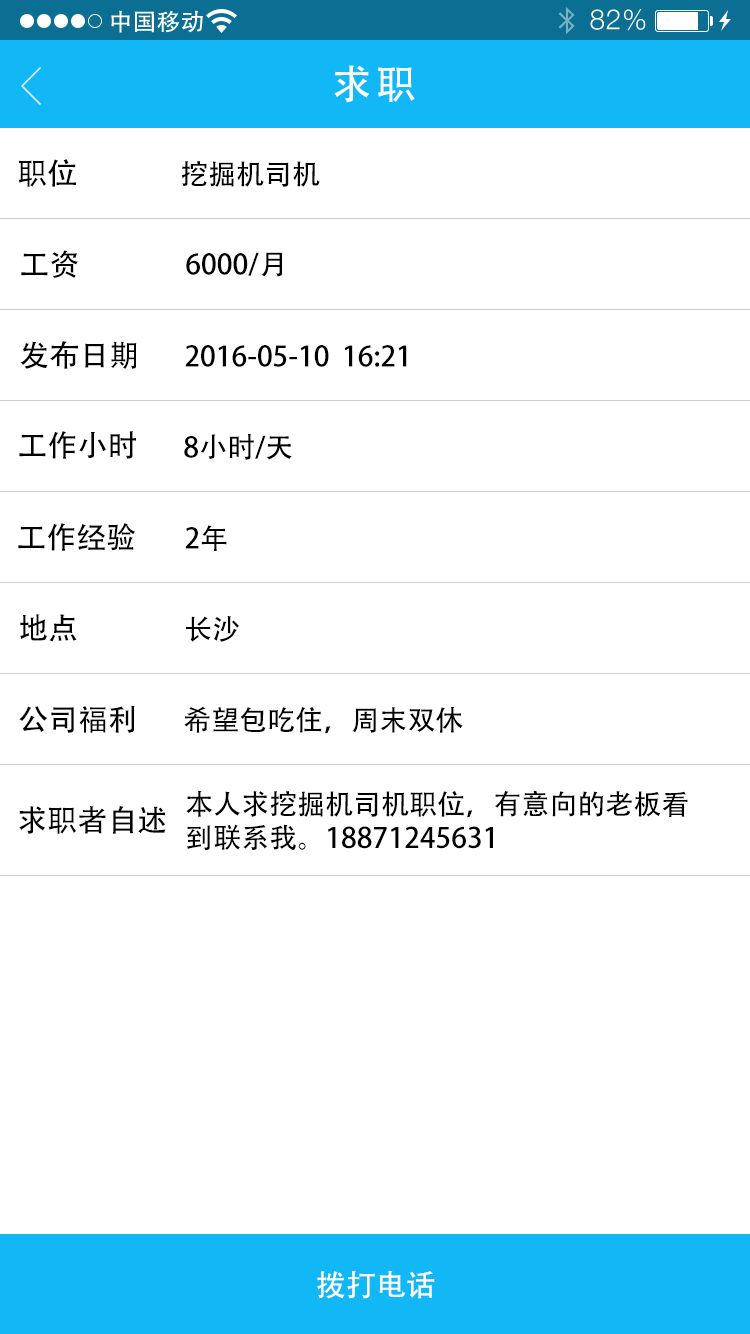
<style>
.page{position:relative;width:750px;height:1334px;background:#ffffff}
.page>*{position:absolute;margin:0}
.t1{font:40px "AdobeHeitiStd-Regular";letter-spacing:0.104em;color:#ffffff}
.t2{font:30px "AdobeHeitiStd-Regular";color:#000000}
.t3{font:28px "AdobeHeitiStd-Regular";color:#000000}
.t4{font:30px "AdobeHeitiStd-Regular";color:#ffffff}
</style>
<div class="page">
<p class="t1" style="left:334px;top:65px;width:81px;height:38px">求职</p>
<p class="t2" style="left:18px;top:159px;width:58px;height:28px">职位</p>
<p class="t3" style="left:181px;top:161px;width:139px;height:26px">挖掘机司机</p>
<p class="t2" style="left:21px;top:250px;width:57px;height:28px">工资</p>
<p class="t3" style="left:186px;top:252px;width:96px;height:25px">6000/月</p>
<p class="t2" style="left:20px;top:341px;width:117px;height:28px">发布日期</p>
<p class="t3" style="left:185px;top:345px;width:222px;height:22px">2016-05-10  16:21</p>
<p class="t2" style="left:19px;top:431px;width:117px;height:28px">工作小时</p>
<p class="t3" style="left:184px;top:434px;width:108px;height:26px">8小时/天</p>
<p class="t2" style="left:18px;top:523px;width:118px;height:28px">工作经验</p>
<p class="t3" style="left:185px;top:525px;width:42px;height:26px">2年</p>
<p class="t2" style="left:20px;top:614px;width:57px;height:28px">地点</p>
<p class="t3" style="left:186px;top:616px;width:54px;height:26px">长沙</p>
<p class="t2" style="left:19px;top:705px;width:116px;height:28px">公司福利</p>
<p class="t3" style="left:184px;top:706px;width:279px;height:28px">希望包吃住，周末双休</p>
<p class="t3" style="left:186px;top:790px;width:502px;height:61px">本人求挖掘机司机职位，有意向的老板看<br>到联系我。18871245631</p>
<p class="t2" style="left:19px;top:806px;width:147px;height:28px">求职者自述</p>
<p class="t4" style="left:317px;top:1270px;width:118px;height:29px">拨打电话</p>
</div>
